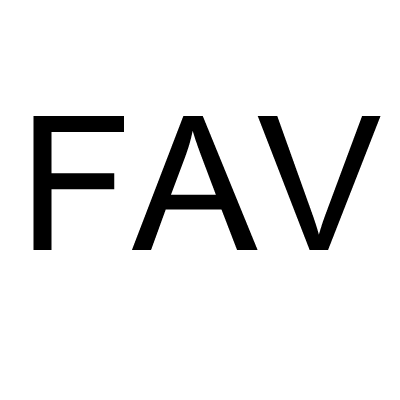
<style>
.page{position:relative;width:400px;height:400px;background:#ffffff}
.page>*{position:absolute;margin:0}
.t1{font:186.9px "ArialMT";color:#000000}
</style>
<div class="page">
<p class="t1" style="left:33px;top:116px;width:348px;height:134px">FAV</p>
</div>
